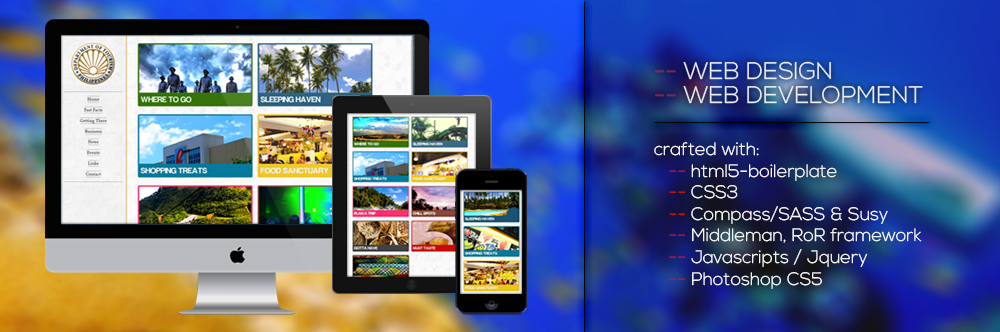
<style>
.page{position:relative;width:1000px;height:332px}
.page>*{position:absolute;margin:0}
.t1{font:24px "NexaLight";color:#fafafa}
.t2{font:24px "NexaLight";color:#be1406}
.t3{font:18px "NexaLight";color:#fafafa}
.t4{font:18px "NexaLight";color:#be1406}
</style>
<div class="page">
<p class="t1" style="left:655px;top:61px;width:176px;height:19px"><span class="t2">--</span> WEB DESIGN</p>
<p class="t1" style="left:655px;top:85px;width:268px;height:19px"><span class="t2">--</span> WEB DEVELOPMENT</p>
<p class="t3" style="left:654px;top:142px;width:268px;height:147px">crafted with:<br><span class="t4">   --</span> html5-boilerplate<br>   <span class="t4">--</span> CSS3<br>   <span class="t4">--</span> Compass/SASS &amp; Susy<br><span class="t4">   --</span> Middleman, RoR framework<br>   <span class="t4">--</span> Javascripts / Jquery<br><span class="t4">   --</span> Photoshop CS5</p>
</div>
